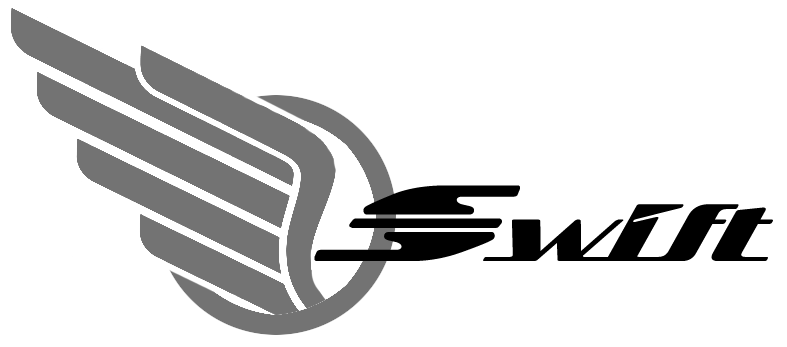
<style>
.page{position:relative;width:787px;height:347px;background:#ffffff}
.page>*{position:absolute;margin:0}
.t1{font:70px "SandovalSpeed";color:#000000}
.t2{font:100px "SandovalSpeed";color:#000000}
</style>
<div class="page">
<p class="t1" style="left:314px;top:185px;width:459px;height:76px"><span class="t2">S</span>wift</p>
</div>
